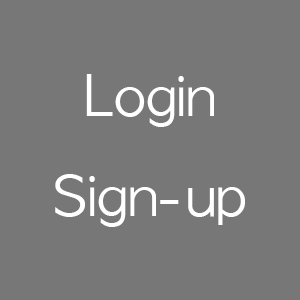
<style>
.page{position:relative;width:300px;height:300px;background:#777777}
.page>*{position:absolute;margin:0}
.t1{font:53.4px/100px "AppleGothic";color:#ffffff;scale:1.03 1}
</style>
<div class="page">
<p class="t1" style="left:55px;top:74px;width:190px;height:153px;text-align:center">Login<br>Sign-up</p>
</div>
